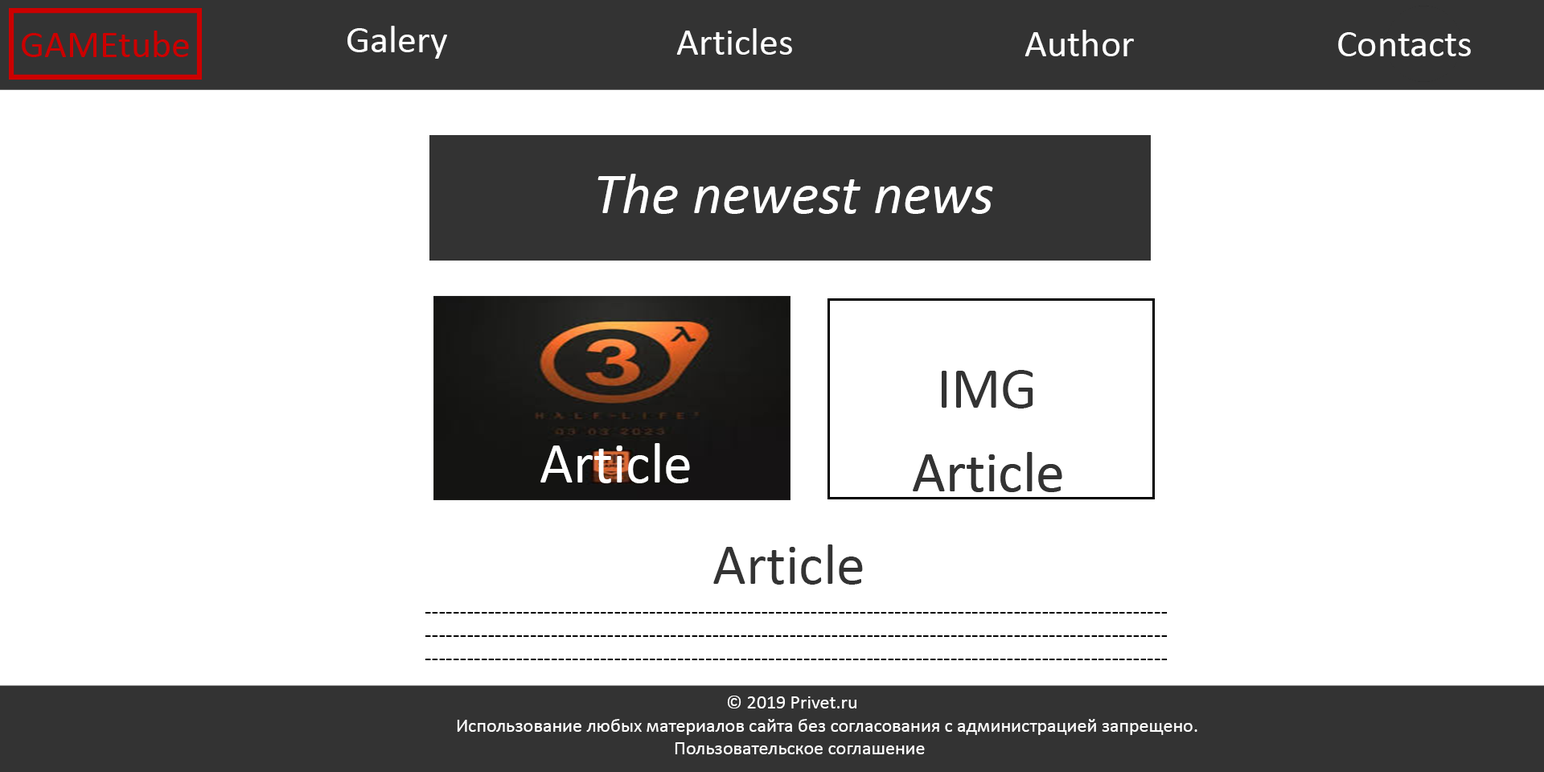
<style>
.page{position:relative;width:1544px;height:772px;background:#ffffff}
.page>*{position:absolute;margin:0}
.t1{font:57.9px "Calibri-Italic";color:#ffffff}
.t2{font:57.9px "Calibri";color:#333333}
.t3{font:57.9px "Calibri";color:#ffffff}
.t4{font:19.3px "Tahoma";color:#000000}
.t5{font:19.3px "Calibri";color:#ffffff}
</style>
<div class="page">
<p class="t1" style="left:598px;top:174px;width:395px;height:40px">The newest news</p>
<p class="t2" style="left:942px;top:370px;width:92px;height:39px">IMG</p>
<p class="t3" style="left:541px;top:443px;width:149px;height:40px">Article</p>
<p class="t2" style="left:913px;top:452px;width:150px;height:40px">Article</p>
<p class="t2" style="left:913px;top:452px;width:150px;height:40px">Article</p>
<p class="t2" style="left:713px;top:545px;width:150px;height:40px">Article</p>
<p class="t4" style="left:425px;top:612px;width:743px;height:48px">----------------------------------------------------------------------------------------------------------<br>----------------------------------------------------------------------------------------------------------<br>----------------------------------------------------------------------------------------------------------</p>
<p class="t5" style="left:457px;top:696px;width:741px;height:58px">© 2019 Privet.ru<br>Использование любых материалов сайта без согласования с администрацией запрещено.<br>                                                  Пользовательское соглашение</p>
</div>
